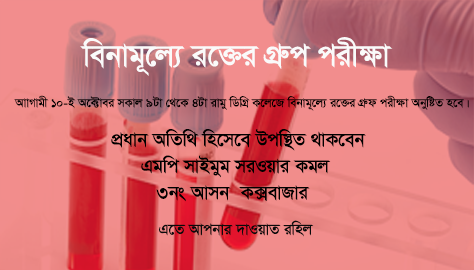
<style>
.page{position:relative;width:474px;height:270px}
.page>*{position:absolute;margin:0}
.t1{font:36px "SutonnyMJ-Bold";color:#fafafa}
.t2{font:14px "SutonnyMJ-Bold";color:#000000}
.t3{font:22px "SutonnyMJ-Bold";color:#000000}
.t4{font:18px "SutonnyMJ-Bold";color:#0a0a0b}
</style>
<div class="page">
<p class="t1" style="left:80px;top:37px;width:313px;height:39px">webvg~‡j¨ i‡³i MÖæc cixÿv</p>
<p class="t2" style="left:14px;top:95px;width:455px;height:16px">AvvMvgx 10-B A‡±vei mKvj 9Uv †_‡K 4Uv ivgy wWwMÖ K‡j‡R webvg~‡j¨ i‡³i MÖæd cixÿv AbywóZ n‡e|</p>
<p class="t3" style="left:111px;top:129px;width:255px;height:73px;text-align:center">cÖavb AwZw_ wn‡m‡e Dcw¯’Z _vK‡eb<br>Ggwc mvBgyg miIqvi Kgj<br>3bs Avmb  K·evRvi</p>
<p class="t4" style="left:159px;top:220px;width:155px;height:17px">G‡Z Avcbvi `vIqvZ iwnj</p>
</div>
